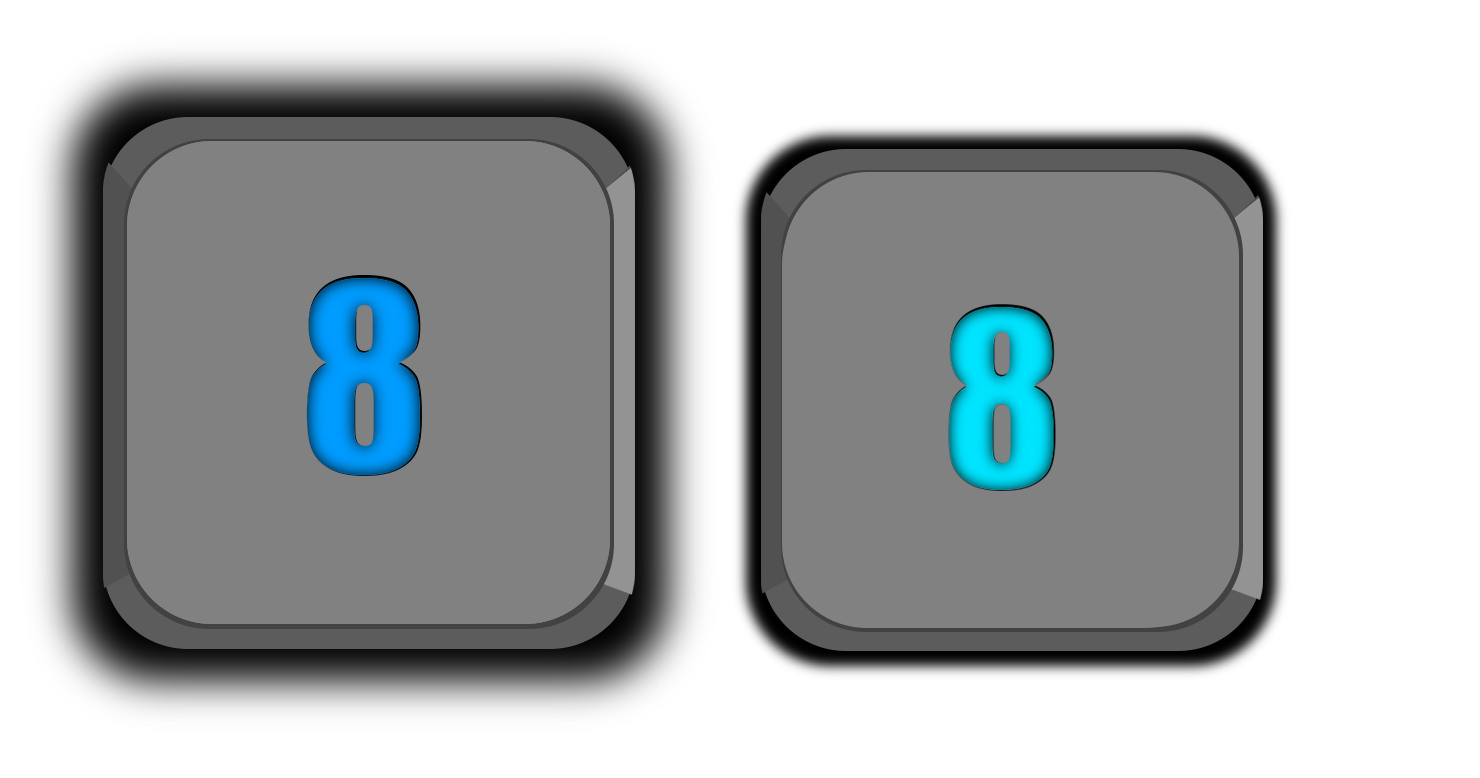
<style>
.page{position:relative;width:1480px;height:778px;background:#818181}
.page>*{position:absolute;margin:0}
.t1{font:244.7px "Impact"}
.t2{font:227.3px "Impact"}
</style>
<div class="page">
<p class="t1" style="left:306px;top:275px;width:116px;height:201px">8</p>
<p class="t2" style="left:948px;top:304px;width:107px;height:186px">8</p>
</div>
